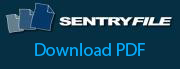
<style>
.page{position:relative;width:180px;height:69px;background:#062f43}
.page>*{position:absolute;margin:0}
.t1{font:18px "MyriadPro-Regular";color:#06a9f8}
</style>
<div class="page">
<p class="t1" style="left:35px;top:43px;width:110px;height:13px">Download PDF</p>
</div>
